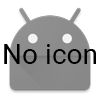
<style>
.page{position:relative;width:100px;height:100px;background:#ffffff}
.page>*{position:absolute;margin:0}
.t1{font:28.1px "Roboto-Regular";color:#000000}
</style>
<div class="page">
<p class="t1" style="left:4px;top:44px;width:92px;height:20px">No icon</p>
</div>
